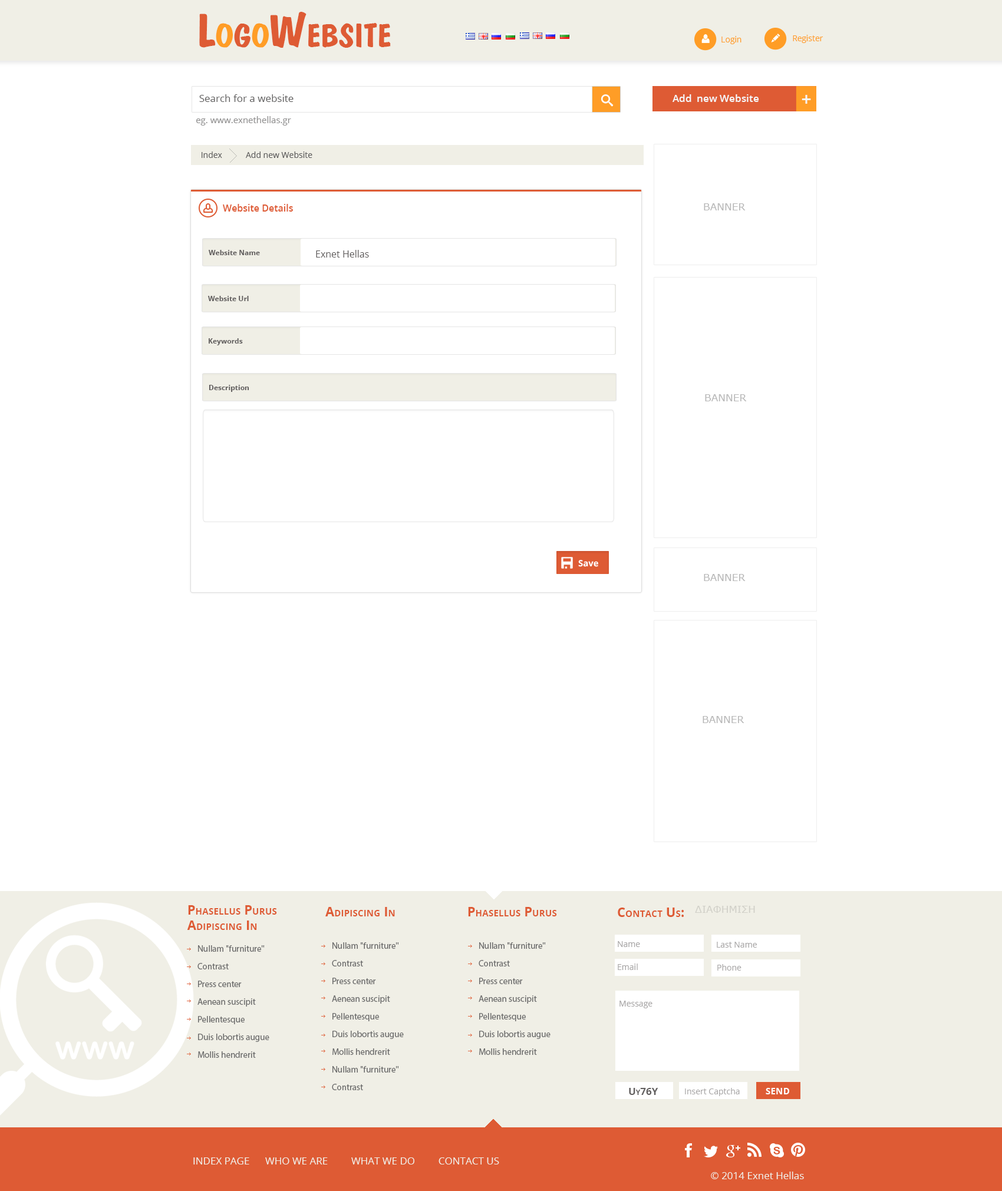
<style>
.page{position:relative;width:1002px;height:1191px;background:#ffffff}
.page>*{position:absolute;margin:0}
.t1{font:47.1px "DomkratBold";color:#de5b34;font-variant:small-caps}
.t2{font:47.1px "DomkratBold";color:#ff9d26;font-variant:small-caps}
.t3{font:8.2px "OpenSans";color:#ff9d26}
.t4{font:10px "OpenSans";color:#5e5d5d}
.t5{font:10px "OpenSans-Semibold";color:#f5f5f5}
.t6{font:13px "Verdana-Bold";color:#f5f5f5}
.t7{font:8.8px "OpenSans";color:#919090}
.t8{font:8.2px "OpenSans";color:#5e5d5d}
.t9{font:9.4px "OpenSans-Semibold";color:#de5b34}
.t10{font:10px "Verdana";color:#b8b8b8;text-transform:uppercase}
.t11{font:7.1px "OpenSans-Bold";color:#5e5b5b}
.t12{font:9.4px "OpenSans";color:#5c5959}
.t13{font:8.8px "OpenSans-Bold";color:#ffffff}
.t14{font:13px "OpenSans-Bold";color:#de5b34;font-variant:small-caps}
.t15{font:10px "Verdana";color:#d2d1c9;text-transform:uppercase}
.t16{font:8.2px "OpenSans";color:#a9a7a7}
.t17{font:8.8px/17.7px "MyriadPro-Regular";color:#6b6b6b}
.t18{font:10px "OpenSans-Bold";color:#625f5f;font-variant:small-caps}
.t19{font:13px "OpenSans-Bold";color:#ffffff;font-variant:small-caps}
.t20{font:10px "OpenSans";color:#f0efe6}
</style>
<div class="page">
<p class="t1" style="left:199px;top:12px;width:192px;height:36px">L<span class="t2">o</span>g<span class="t2">o</span>Website</p>
<p class="t3" style="left:721px;top:36px;width:20px;height:8px">Login</p>
<p class="t3" style="left:792px;top:35px;width:31px;height:8px">Register</p>
<p class="t4" style="left:199px;top:94px;width:94px;height:8px">Search for a website</p>
<p class="t5" style="left:672px;top:94px;width:87px;height:8px">Add  new Website</p>
<p class="t6" style="left:801px;top:95px;width:10px;height:9px">+</p>
<p class="t7" style="left:196px;top:116px;width:95px;height:9px">eg. www.exnethellas.gr</p>
<p class="t8" style="left:201px;top:151px;width:111px;height:7px">Index           Add new Website</p>
<p class="t9" style="left:223px;top:204px;width:70px;height:7px">Website Details</p>
<p class="t10" style="left:703px;top:203px;width:42px;height:7px">BANNER</p>
<p class="t11" style="left:209px;top:250px;width:51px;height:5px">Website Name</p>
<p class="t12" style="left:316px;top:250px;width:53px;height:7px">Exnet Hellas</p>
<p class="t11" style="left:208px;top:296px;width:41px;height:5px">Website Url</p>
<p class="t11" style="left:209px;top:338px;width:34px;height:7px">Keywords</p>
<p class="t11" style="left:209px;top:385px;width:40px;height:7px">Description</p>
<p class="t10" style="left:705px;top:394px;width:41px;height:7px">BANNER</p>
<p class="t13" style="left:578px;top:560px;width:20px;height:7px">Save</p>
<p class="t10" style="left:703px;top:574px;width:42px;height:7px">BANNER</p>
<p class="t10" style="left:702px;top:716px;width:42px;height:7px">BANNER</p>
<p class="t14" style="left:187px;top:905px;width:90px;height:25px">Phasellus Purus <br> Adipiscing In</p>
<p class="t15" style="left:695px;top:905px;width:60px;height:8px">ΔΙΑΦΗΜΙΣΗ</p>
<p class="t14" style="left:325px;top:907px;width:70px;height:9px">Adipiscing In</p>
<p class="t14" style="left:468px;top:907px;width:89px;height:9px">Phasellus Purus</p>
<p class="t14" style="left:617px;top:907px;width:66px;height:10px">Contact Us:</p>
<p class="t16" style="left:617px;top:941px;width:23px;height:6px">Name</p>
<p class="t16" style="left:716px;top:941px;width:40px;height:6px">Last Name</p>
<p class="t17" style="left:197px;top:945px;width:72px;height:112px">Nullam "furniture"<br>Contrast<br>Press center<br>Aenean suscipit<br>Pellentesque<br>Duis lobortis augue <br>Mollis hendrerit</p>
<p class="t17" style="left:332px;top:942px;width:72px;height:148px">Nullam "furniture"<br>Contrast<br>Press center<br>Aenean suscipit<br>Pellentesque<br>Duis lobortis augue <br>Mollis hendrerit<br>Nullam "furniture"<br>Contrast</p>
<p class="t17" style="left:478px;top:942px;width:72px;height:113px">Nullam "furniture"<br>Contrast<br>Press center<br>Aenean suscipit<br>Pellentesque<br>Duis lobortis augue <br>Mollis hendrerit</p>
<p class="t16" style="left:617px;top:963px;width:20px;height:7px">Email</p>
<p class="t16" style="left:717px;top:964px;width:24px;height:6px">Phone</p>
<p class="t16" style="left:619px;top:1000px;width:33px;height:8px">Message</p>
<p class="t18" style="left:629px;top:1088px;width:29px;height:7px">Uy76Y</p>
<p class="t16" style="left:685px;top:1088px;width:54px;height:8px">Insert Captcha</p>
<p class="t19" style="left:765px;top:1088px;width:24px;height:6px">send</p>
<p class="t20" style="left:193px;top:1157px;width:306px;height:7px">INDEX PAGE      WHO WE ARE         WHAT WE DO         CONTACT US</p>
<p class="t20" style="left:710px;top:1171px;width:94px;height:8px">© 2014 Exnet Hellas</p>
</div>
